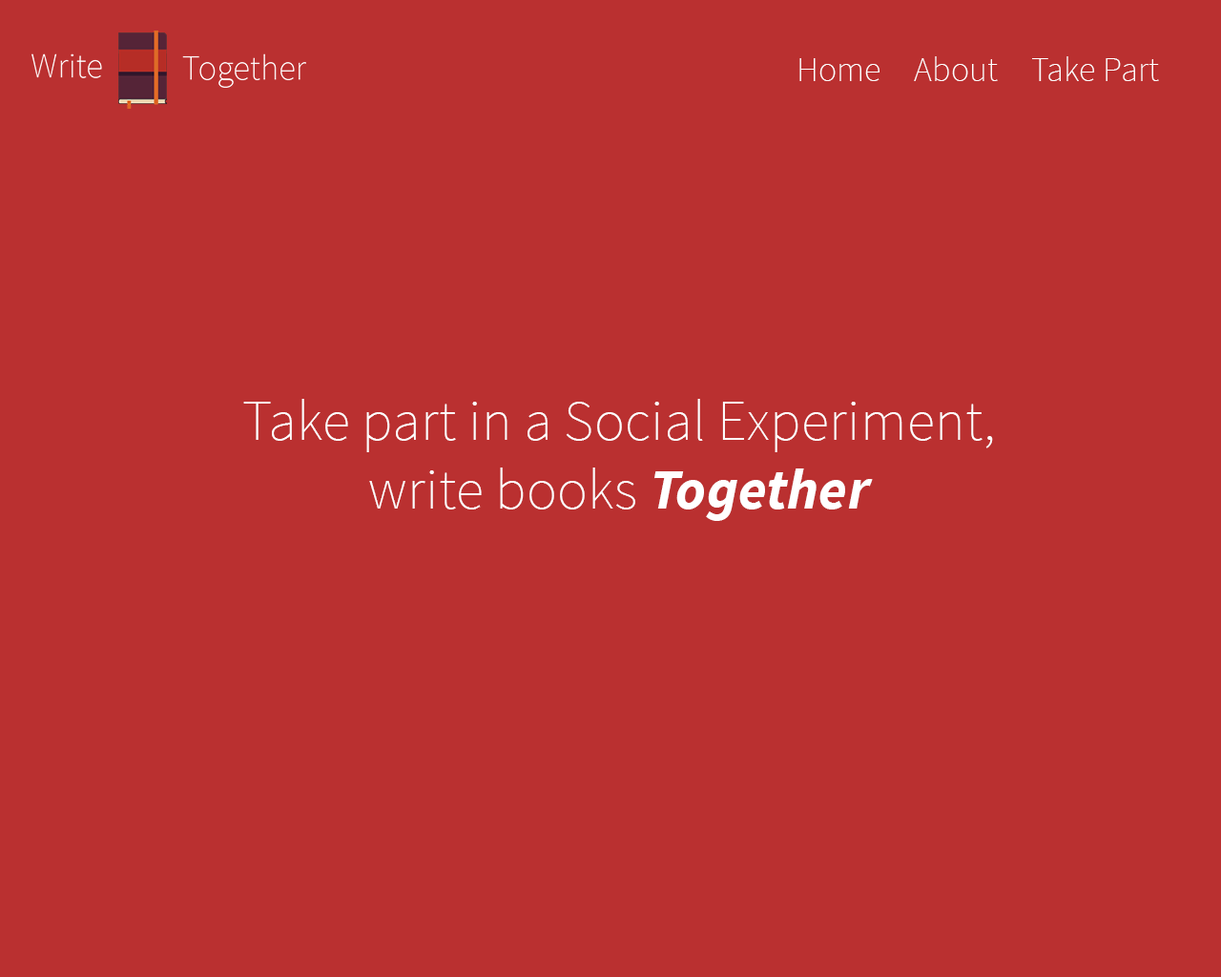
<style>
.page{position:relative;width:1221px;height:977px;background:#ba3030}
.page>*{position:absolute;margin:0}
.t1{font:34.3px "SourceSansPro-ExtraLight";letter-spacing:0.007em;color:#ffffff}
.t2{font:57.2px "SourceSansPro-ExtraLight";letter-spacing:0.007em;color:#ffffff}
.t3{font:57.2px "SourceSansPro-BoldIt";letter-spacing:0.007em;color:#ffffff}
</style>
<div class="page">
<p class="t1" style="left:799px;top:58px;width:80px;height:23px">Home</p>
<p class="t1" style="left:914px;top:56px;width:84px;height:25px">About</p>
<p class="t1" style="left:1032px;top:56px;width:127px;height:25px">Take Part</p>
<p class="t2" style="left:243px;top:399px;width:750px;height:122px;text-align:center">Take part in a Social Experiment,<br>write books <span class="t3">Together</span></p>
</div>
